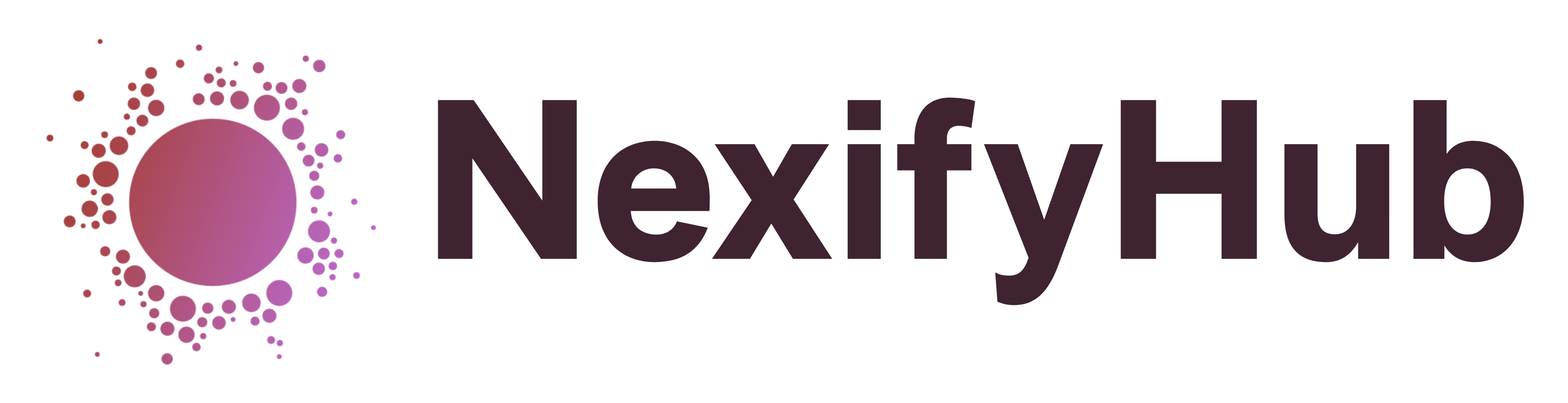
<style>
.page{position:relative;width:1568px;height:403px;background:#ffffff}
.page>*{position:absolute;margin:0}
.t1{font:220.6px "VremenaGroteskBold";color:#3f2331}
</style>
<div class="page">
<p class="t1" style="left:438px;top:98px;width:1086px;height:208px">NexifyHub</p>
</div>
